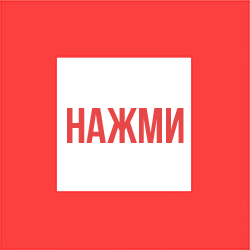
<style>
.page{position:relative;width:250px;height:250px;background:#fc4040}
.page>*{position:absolute;margin:0}
.t1{font:50px "BebasNeueBold";color:#e74747}
</style>
<div class="page">
<p class="t1" style="left:67px;top:108px;width:117px;height:35px">Нажми</p>
</div>
